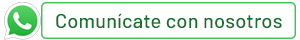
<style>
.page{position:relative;width:300px;height:40px;background:#ffffff}
.page>*{position:absolute;margin:0}
.t1{font:20px "Barlow-Medium";letter-spacing:0.01em;color:#156f2d}
</style>
<div class="page">
<p class="t1" style="left:56px;top:13px;width:226px;height:16px">Comunícate con nosotros</p>
</div>
